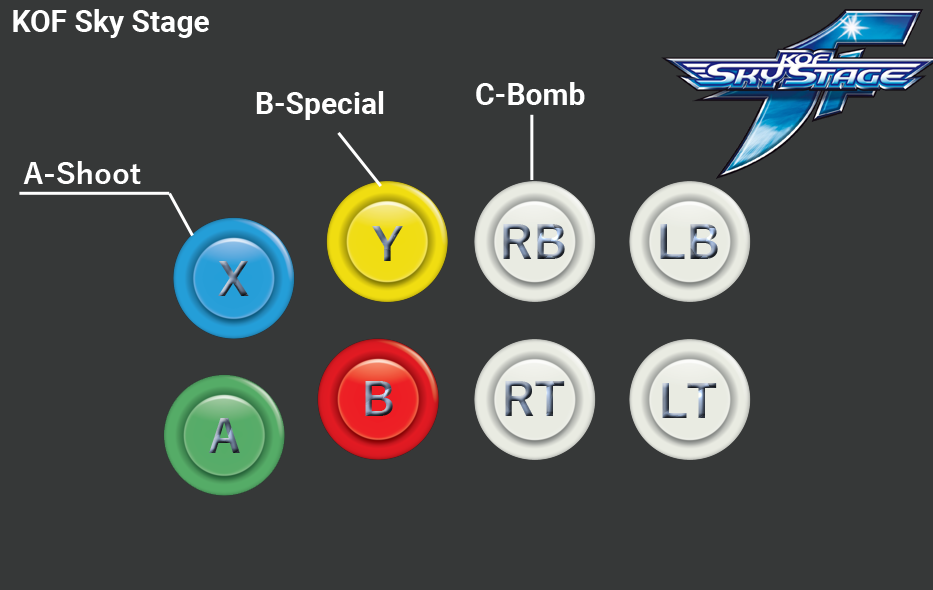
<style>
.page{position:relative;width:933px;height:590px;background:#363838}
.page>*{position:absolute;margin:0}
.t1{font:30px "Roboto-Bold";color:#ffffff}
.t2{font:30px "YuGothic-Bold";color:#ffffff}
</style>
<div class="page">
<p class="t1" style="left:13px;top:9px;width:196px;height:29px">KOF Sky Stage</p>
<p class="t1" style="left:476px;top:82px;width:109px;height:23px">C-Bomb</p>
<p class="t1" style="left:256px;top:91px;width:128px;height:29px">B-Special</p>
<p class="t2" style="left:23px;top:161px;width:118px;height:23px">A-Shoot</p>
</div>
